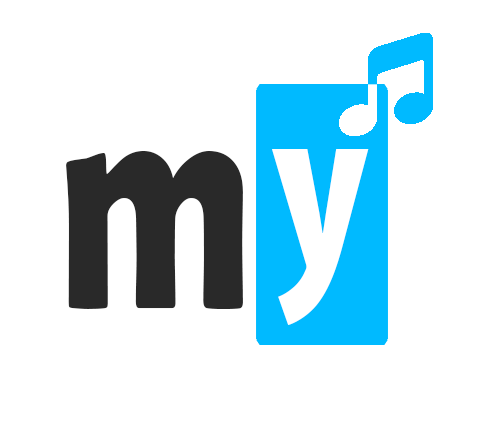
<style>
.page{position:relative;width:498px;height:440px;background:#ffffff}
.page>*{position:absolute;margin:0}
.t1{font:250px "MyriadPro-BoldCond";color:#ffffff}
.t2{font:322.8px "BerlinSansFBDemi-Bold";color:#292929;scale:0.7 1}
</style>
<div class="page">
<p class="t1" style="left:272px;top:149px;width:97px;height:177px">y</p>
<p class="t2" style="left:66px;top:151px;width:177px;height:158px">m</p>
</div>
